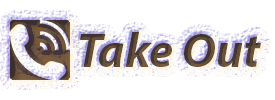
<style>
.page{position:relative;width:275px;height:100px;background:#ffffff}
.page>*{position:absolute;margin:0}
.t1{font:48px "MyriadPro-BoldIt"}
</style>
<div class="page">
<p class="t1" style="left:80px;top:32px;width:181px;height:35px">Take Out</p>
</div>
